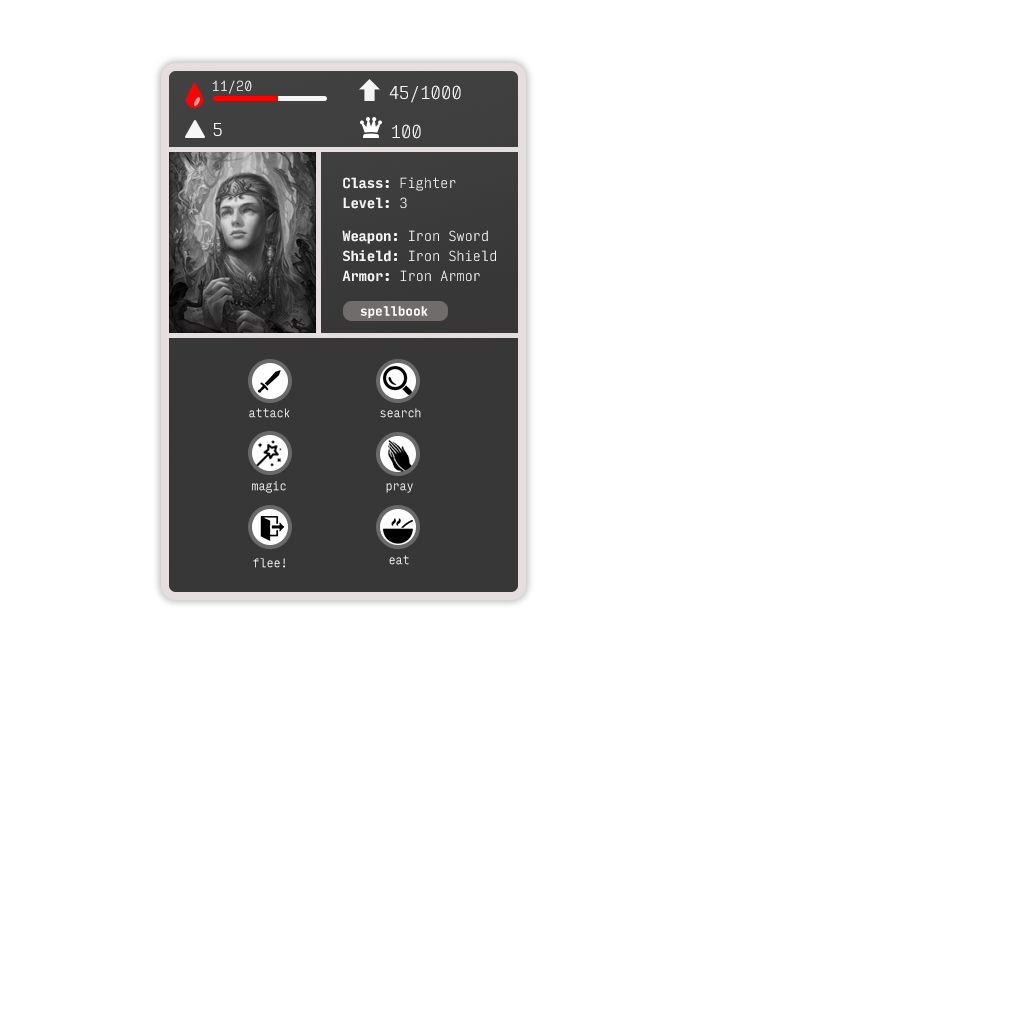
<style>
.page{position:relative;width:1024px;height:1024px;background:#ffffff}
.page>*{position:absolute;margin:0}
.t1{font:14px "Input-Regular";letter-spacing:-0.02em;color:#f5f5f5}
.t2{font:18px "Input-Regular";letter-spacing:-0.02em;color:#f5f5f5}
.t3{font:14px "Input-Bold";letter-spacing:-0.02em;color:#f5f5f5}
.t4{font:13px "Input-Bold";letter-spacing:-0.02em;color:#fefefe}
.t5{font:12px "Input-Regular";letter-spacing:-0.02em}
.t6{font:12px "Input-Regular";letter-spacing:-0.02em;color:#ffffff}
</style>
<div class="page">
<p class="t1" style="left:212px;top:80px;width:40px;height:14px">11/20</p>
<p class="t2" style="left:389px;top:85px;width:72px;height:18px">45/1000</p>
<p class="t2" style="left:213px;top:123px;width:9px;height:14px">5</p>
<p class="t2" style="left:392px;top:124px;width:29px;height:15px">100</p>
<p class="t1" style="left:343px;top:177px;width:113px;height:14px"><span class="t3">Class:</span> Fighter</p>
<p class="t3" style="left:343px;top:197px;width:64px;height:12px">Level: <span class="t1">3</span></p>
<p class="t1" style="left:342px;top:230px;width:146px;height:14px"><span class="t3">Weapon: </span>Iron Sword</p>
<p class="t1" style="left:343px;top:250px;width:153px;height:12px"><span class="t3">Shield:</span> Iron Shield</p>
<p class="t1" style="left:342px;top:270px;width:138px;height:12px"><span class="t3">Armor:</span> Iron Armor</p>
<p class="t4" style="left:360px;top:306px;width:68px;height:12px">spellbook</p>
<p class="t5" style="left:249px;top:408px;width:41px;height:10px">attack</p>
<p class="t5" style="left:380px;top:408px;width:41px;height:10px">search</p>
<p class="t5" style="left:252px;top:481px;width:34px;height:12px">magic</p>
<p class="t5" style="left:386px;top:483px;width:27px;height:10px">pray</p>
<p class="t6" style="left:253px;top:558px;width:32px;height:10px">flee!</p>
<p class="t5" style="left:389px;top:555px;width:20px;height:10px">eat</p>
</div>
